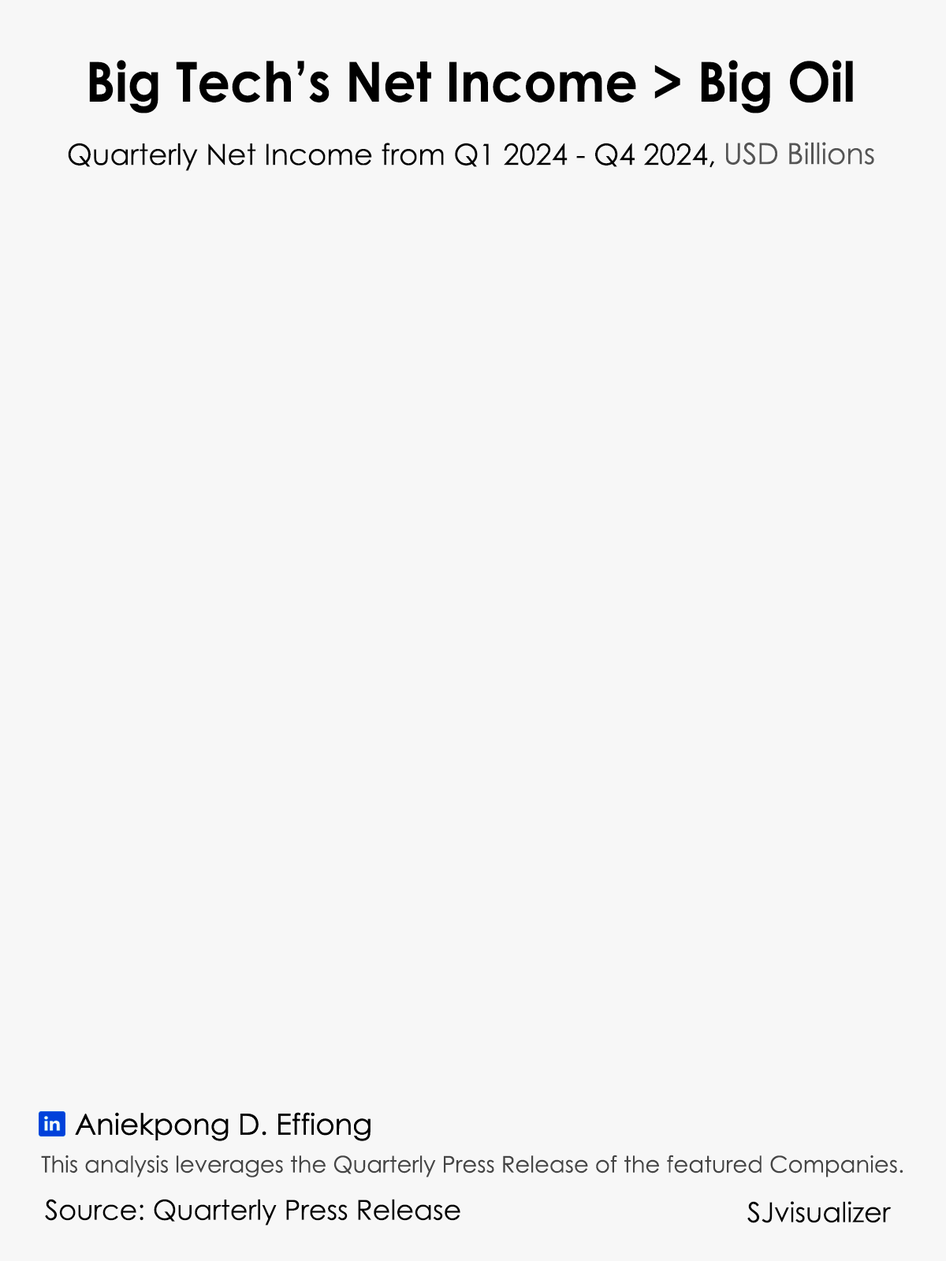
<style>
.page{position:relative;width:946px;height:1261px;background:#f7f7f7}
.page>*{position:absolute;margin:0}
.t1{font:55.2px "CenturyGothic-Bold";color:#000000;scale:0.93 1}
.t2{font:29.2px "CenturyGothic";color:#000000}
.t3{font:29.2px "CenturyGothic";color:#555555}
.t4{font:22.9px "CenturyGothic";color:#454545}
.t5{font:27.6px "CenturyGothic";color:#000000}
</style>
<div class="page">
<p class="t1" style="left:89px;top:60px;width:764px;height:53px">Big Tech’s Net Income &gt; Big Oil</p>
<p class="t2" style="left:68px;top:143px;width:646px;height:28px">Quarterly Net Income from Q1 2024 - Q4 2024,</p>
<p class="t3" style="left:726px;top:142px;width:148px;height:23px">USD Billions</p>
<p class="t2" style="left:75px;top:1112px;width:295px;height:29px">Aniekpong D. Effiong</p>
<p class="t2" style="left:75px;top:1112px;width:295px;height:29px">Aniekpong D. Effiong</p>
<p class="t4" style="left:41px;top:1155px;width:862px;height:22px">This analysis leverages the Quarterly Press Release of the featured Companies.</p>
<p class="t5" style="left:45px;top:1199px;width:415px;height:26px">Source: Quarterly Press Release</p>
<p class="t5" style="left:747px;top:1201px;width:144px;height:22px">SJvisualizer</p>
</div>
